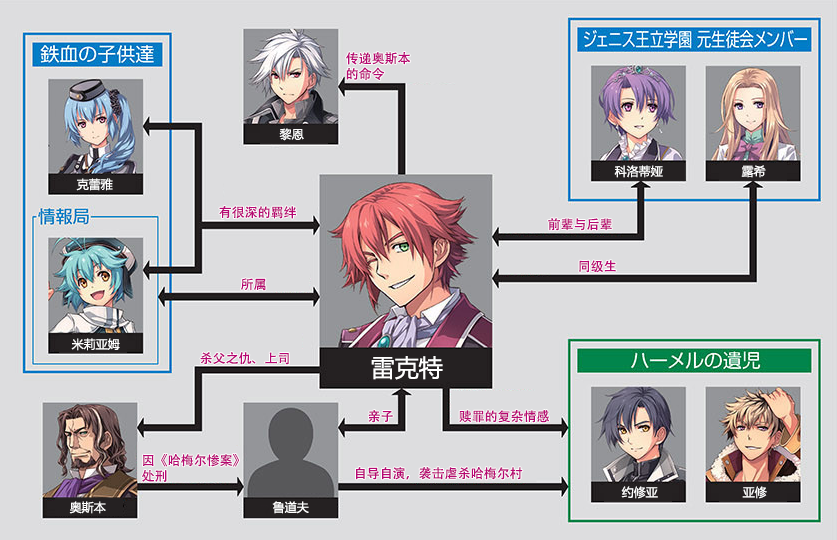
<style>
.page{position:relative;width:837px;height:540px;background:#dddddf}
.page>*{position:absolute;margin:0}
.t1{font:13px/15.7px "AdobeHeitiStd-Regular";color:#b70773}
.t2{font:12px "MicrosoftYaHei";color:#ffffff}
.t3{font:13px "AdobeHeitiStd-Regular";color:#b70773}
.t4{font:24px "MicrosoftYaHei";color:#ffffff}
</style>
<div class="page">
<p class="t1" style="left:346px;top:52px;width:65px;height:29px">传递奥斯本<br>的命令</p>
<p class="t2" style="left:279px;top:128px;width:25px;height:13px">黎恩</p>
<p class="t2" style="left:614px;top:165px;width:49px;height:13px">科洛蒂娅</p>
<p class="t2" style="left:741px;top:165px;width:25px;height:13px">露希</p>
<p class="t2" style="left:76px;top:178px;width:37px;height:13px">克蕾雅</p>
<p class="t3" style="left:219px;top:206px;width:77px;height:13px">有很深的羁绊</p>
<p class="t3" style="left:548px;top:218px;width:64px;height:13px">前辈与后辈</p>
<p class="t3" style="left:579px;top:260px;width:37px;height:13px">同级生</p>
<p class="t3" style="left:241px;top:278px;width:25px;height:13px">所属</p>
<p class="t2" style="left:71px;top:338px;width:49px;height:13px">米莉亚姆</p>
<p class="t3" style="left:200px;top:352px;width:89px;height:13px">杀父之仇、上司</p>
<p class="t4" style="left:371px;top:356px;width:72px;height:24px">雷克特</p>
<p class="t3" style="left:368px;top:410px;width:25px;height:13px">亲子</p>
<p class="t3" style="left:459px;top:409px;width:90px;height:14px">赎罪的复杂情感</p>
<p class="t1" style="left:142px;top:454px;width:97px;height:28px">因《哈梅尔惨案》<br>处刑</p>
<p class="t3" style="left:356px;top:467px;width:167px;height:13px">自导自演，袭击虐杀哈梅尔村</p>
<p class="t2" style="left:621px;top:486px;width:37px;height:13px">约修亚</p>
<p class="t2" style="left:742px;top:486px;width:25px;height:13px">亚修</p>
<p class="t2" style="left:69px;top:501px;width:37px;height:13px">奥斯本</p>
<p class="t2" style="left:272px;top:501px;width:37px;height:13px">鲁道夫</p>
</div>
